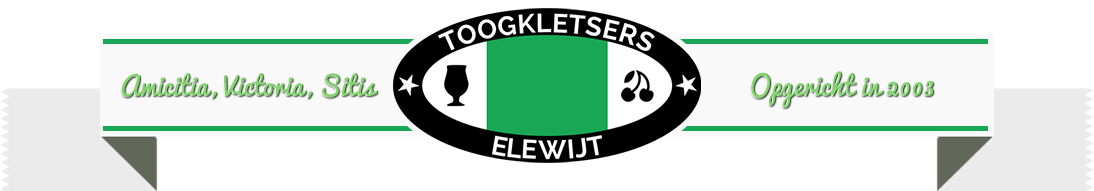
<style>
.page{position:relative;width:1094px;height:191px;background:#ffffff}
.page>*{position:absolute;margin:0}
.t1{font:26px "Pacifico";color:#86d373}
</style>
<div class="page">
<p class="t1" style="left:120px;top:73px;width:257px;height:26px">Amicitia, Victoria, Sitis</p>
<p class="t1" style="left:121px;top:73px;width:257px;height:26px">Amicitia, Victoria, Sitis</p>
<p class="t1" style="left:750px;top:71px;width:183px;height:37px">Opgericht in 2003</p>
<p class="t1" style="left:751px;top:71px;width:183px;height:37px">Opgericht in 2003</p>
</div>
